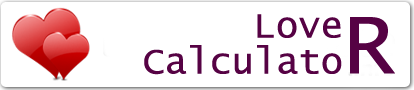
<style>
.page{position:relative;width:414px;height:90px;background:#ffffff}
.page>*{position:absolute;margin:0}
.t1{font:37px "LucidaConsole";color:#560244}
.t2{font:90px "LucidaConsole";color:#560244}
</style>
<div class="page">
<p class="t1" style="left:257px;top:14px;width:84px;height:24px">Love</p>
<p class="t2" style="left:350px;top:17px;width:45px;height:57px">R</p>
<p class="t1" style="left:144px;top:45px;width:198px;height:30px">Calculato</p>
</div>
